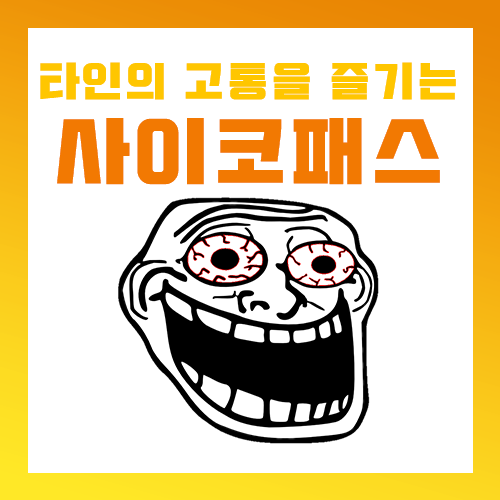
<style>
.page{position:relative;width:500px;height:500px;background:#ffffff}
.page>*{position:absolute;margin:0}
.t1{font:41.7px "Typo_SsangmunDong_B";letter-spacing:0.05em;color:#ffc600}
.t2{font:75px "Typo_SsangmunDong_B";letter-spacing:0.05em;color:#f27902}
</style>
<div class="page">
<p class="t1" style="left:40px;top:62px;width:416px;height:38px">타인의 고통을 즐기는</p>
<p class="t2" style="left:57px;top:118px;width:383px;height:67px">사이코패스</p>
</div>
